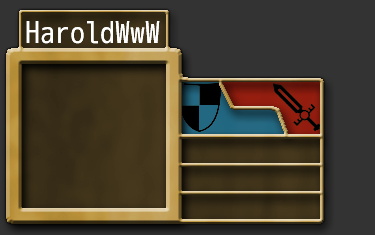
<style>
.page{position:relative;width:375px;height:235px;background:#333333}
.page>*{position:absolute;margin:0}
.t1{font:30px "mplus-1m-regular";color:#ffffff}
</style>
<div class="page">
<p class="t1" style="left:26px;top:21px;width:134px;height:23px">HaroldWwW</p>
<p class="t1" style="left:26px;top:21px;width:134px;height:23px">HaroldWwW</p>
</div>
